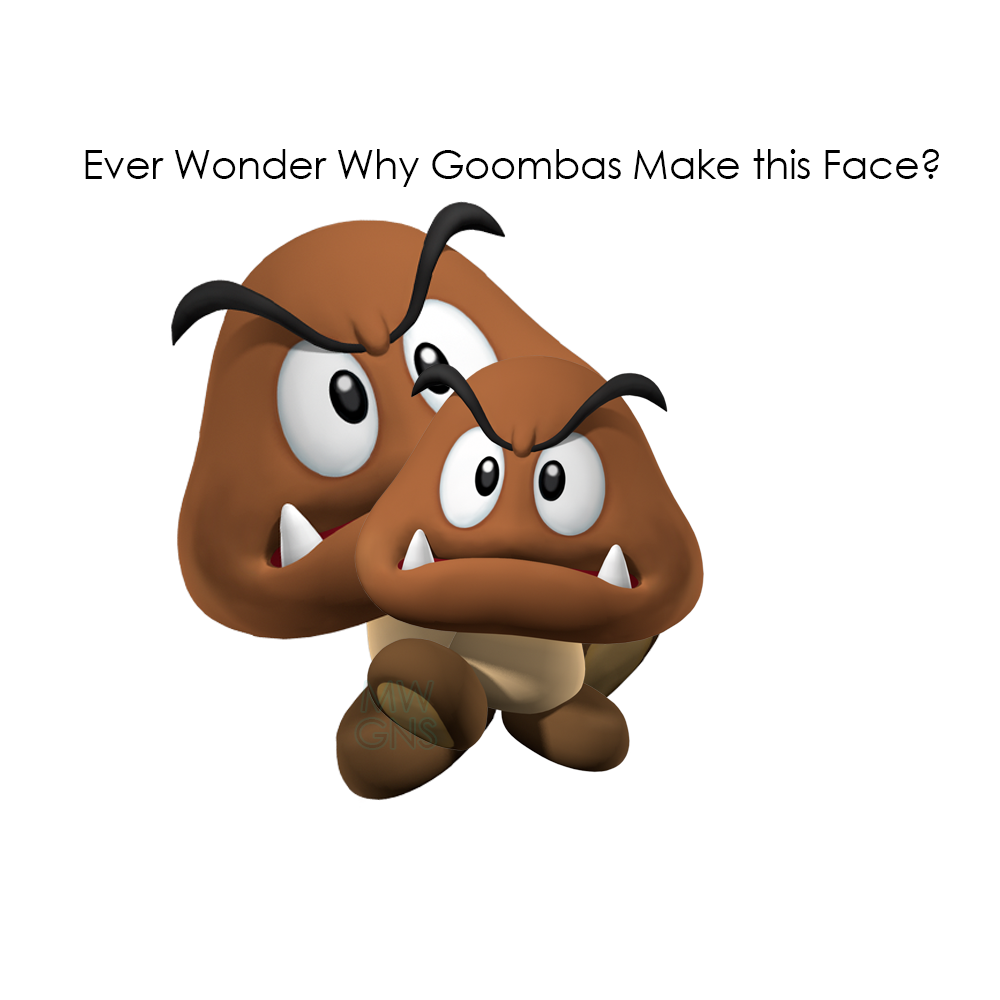
<style>
.page{position:relative;width:1000px;height:1000px;background:#ffffff}
.page>*{position:absolute;margin:0}
.t1{font:40px "CenturyGothic";letter-spacing:-0.01em;color:#000000}
</style>
<div class="page">
<p class="t1" style="left:85px;top:149px;width:854px;height:38px">Ever Wonder Why Goombas Make this Face?</p>
</div>
